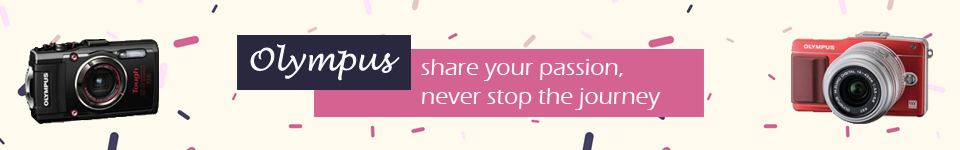
<style>
.page{position:relative;width:960px;height:150px;background:#fefaee}
.page>*{position:absolute;margin:0}
.t1{font:30.4px "LucidaHandwriting-Italic";color:#f8f8fa}
.t2{font:23.9px "ErasITC-Medium";color:#fbfafa}
</style>
<div class="page">
<p class="t1" style="left:250px;top:44px;width:150px;height:37px">Olympus</p>
<p class="t2" style="left:421px;top:59px;width:240px;height:51px">share your passion,<br>never stop the journey</p>
</div>
